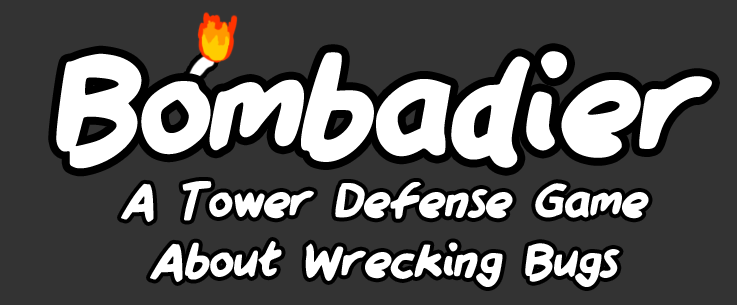
<style>
.page{position:relative;width:737px;height:305px;background:#333333}
.page>*{position:absolute;margin:0}
.t1{font:159.4px "QAReports";color:#ffffff;font-style:italic}
.t2{font:53.8px/29.9px "QAReports";color:#ffffff;font-style:italic}
</style>
<div class="page">
<p class="t1" style="left:56px;top:51px;width:656px;height:118px">Bombadier</p>
<p class="t2" style="left:121px;top:181px;width:528px;height:106px;text-align:center">A Tower Defense Game<br><br>About Wrecking Bugs</p>
</div>
